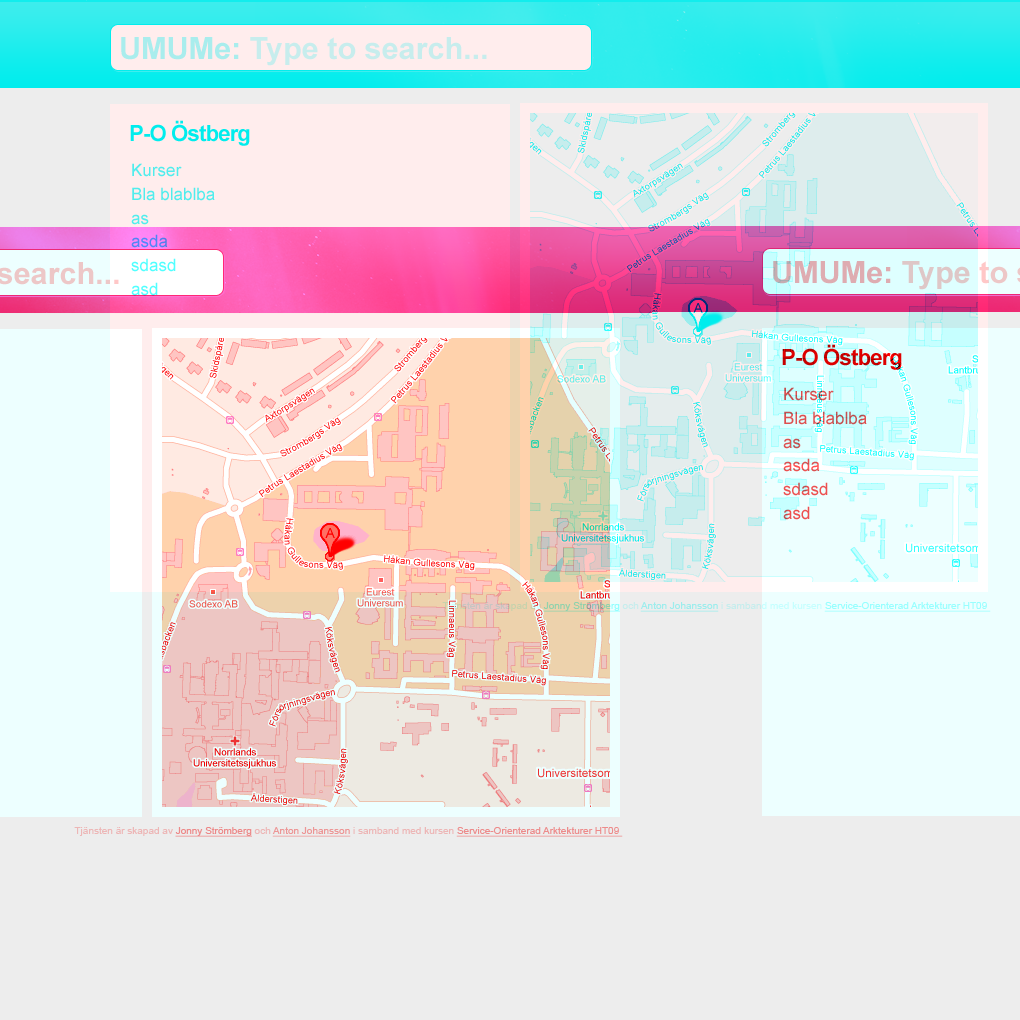
<style>
.page{position:relative;width:1020px;height:1020px;background:#ededed}
.page>*{position:absolute;margin:0}
.t1{font:30.5px "Arial-BoldMT"}
.t2{font:22.2px "Arial-BoldMT";letter-spacing:-0.04em}
.t3{font:17px/23.7px "ArialMT"}
</style>
<div class="page">
<p class="t1" style="left:121px;top:35px;width:366px;height:29px">UMUMe: Type to search...</p>
<p class="t2" style="left:130px;top:118px;width:120px;height:26px">P-O Östberg</p>
<p class="t3" style="left:131px;top:161px;width:84px;height:133px">Kurser<br>Bla blablba<br>as<br>asda<br>sdasd<br>asd</p>
</div>
